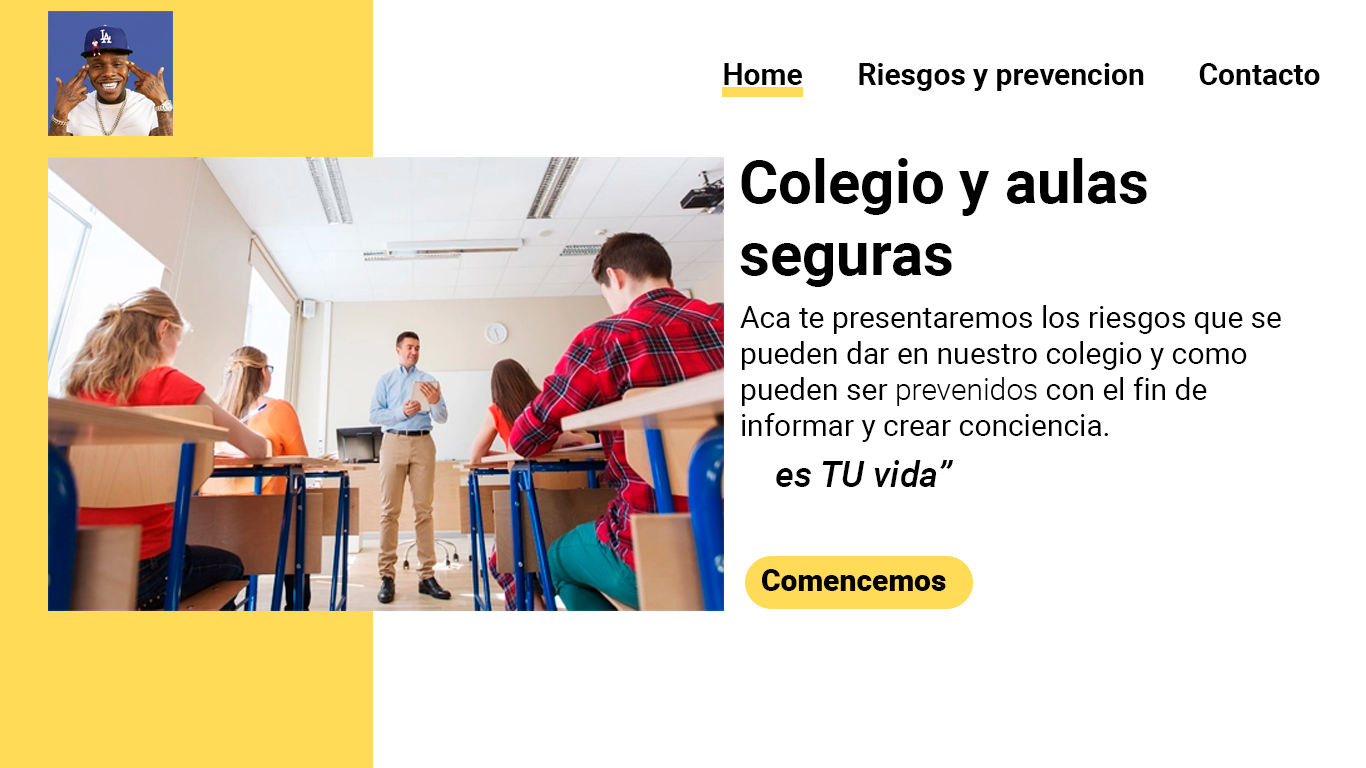
<style>
.page{position:relative;width:1366px;height:768px;background:#ffffff}
.page>*{position:absolute;margin:0}
.t1{font:30px "Roboto-Bold";color:#000000}
.t2{font:60px "Roboto-Bold";color:#000000}
.t3{font:30px "Roboto-Regular";color:#000000}
.t4{font:30px "Roboto-Light";color:#000000}
.t5{font:36px "Roboto-MediumItalic";color:#000000}
.t6{font:30px "Roboto-Black";color:#000000}
</style>
<div class="page">
<p class="t1" style="left:724px;top:63px;width:78px;height:22px">Home</p>
<p class="t1" style="left:859px;top:63px;width:285px;height:28px">Riesgos y prevencion</p>
<p class="t1" style="left:1199px;top:63px;width:121px;height:22px">Contacto</p>
<p class="t2" style="left:740px;top:158px;width:407px;height:129px">Colegio y aulas seguras</p>
<p class="t3" style="left:740px;top:305px;width:541px;height:137px">Aca te presentaremos los riesgos que se pueden dar en nuestro colegio y como pueden ser <span class="t4">prevenidos </span>con el fin de informar y crear conciencia.</p>
<p class="t5" style="left:776px;top:460px;width:177px;height:27px">es TU vida”</p>
<p class="t6" style="left:762px;top:569px;width:184px;height:22px">Comencemos</p>
</div>
